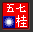
<style>
.page{position:relative;width:33px;height:32px;background:#f20000}
.page>*{position:absolute;margin:0}
.t1{font:10.4px "SimSun";color:#ffffff}
.t2{font:11.7px "SimSun";color:#ffffff}
</style>
<div class="page">
<p class="t1" style="left:7px;top:4px;width:19px;height:8px">五七</p>
<p class="t2" style="left:16px;top:15px;width:11px;height:12px">桂</p>
</div>
